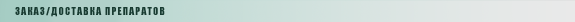
<style>
.page{position:relative;width:575px;height:22px}
.page>*{position:absolute;margin:0}
.t1{font:10px "Impact";letter-spacing:0.1em;color:#183b31}
</style>
<div class="page">
<p class="t1" style="left:15px;top:7px;width:150px;height:10px">ЗАКАЗ/ДОСТАВКА ПРЕПАРАТОВ</p>
</div>
